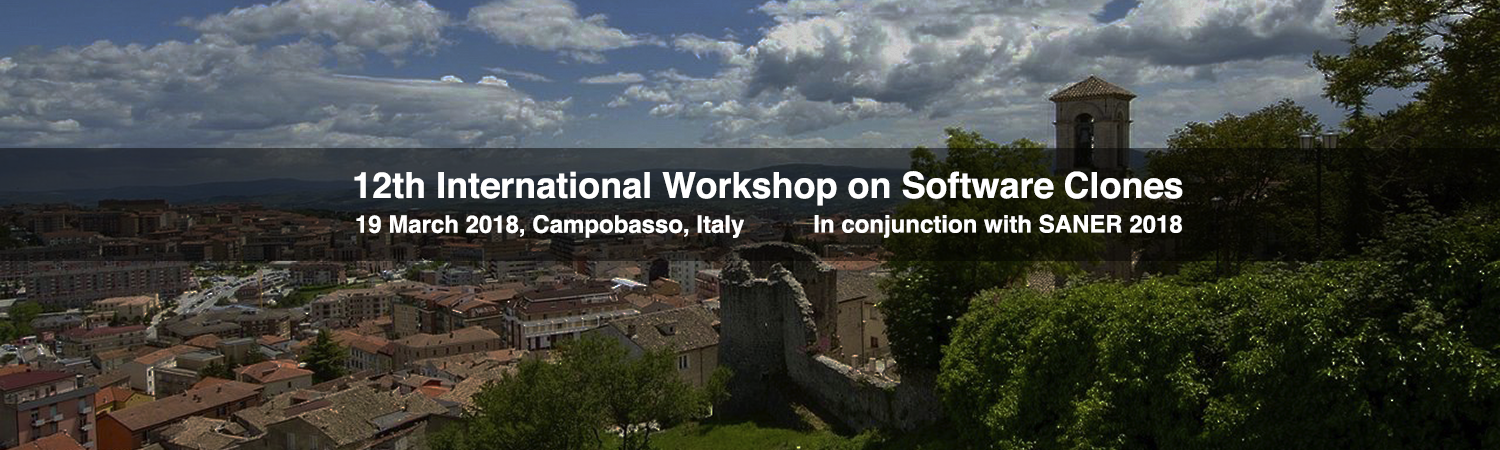
<style>
.page{position:relative;width:1500px;height:450px}
.page>*{position:absolute;margin:0}
.t1{font:36px "Helvetica-Bold";color:#ffffff}
.t2{font:24px "Helvetica-Bold";color:#ffffff}
</style>
<div class="page">
<p class="t1" style="left:354px;top:171px;width:829px;height:35px">12th International Workshop on Software Clones</p>
<p class="t2" style="left:356px;top:215px;width:388px;height:23px">19 March 2018, Campobasso, Italy</p>
<p class="t2" style="left:814px;top:214px;width:368px;height:24px">In conjunction with SANER 2018</p>
</div>
